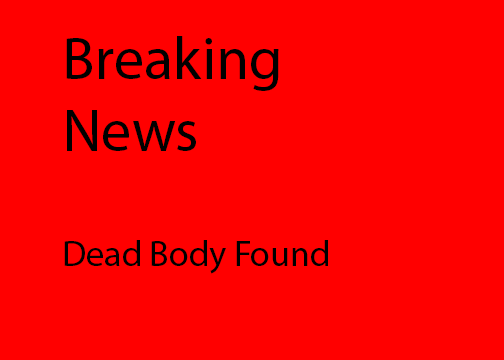
<style>
.page{position:relative;width:504px;height:360px;background:#ff0000}
.page>*{position:absolute;margin:0}
.t1{font:36px "MyriadPro-Regular";color:#000000}
.t2{font:60px "MyriadPro-Regular";color:#000000}
</style>
<div class="page">
<p class="t1" style="left:64px;top:36px;width:264px;height:238px"><span class="t2">Breaking <br>News<br><br></span>Dead Body Found</p>
</div>
